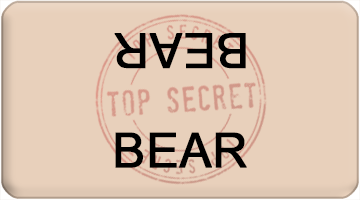
<style>
.page{position:relative;width:360px;height:200px;background:#e8d0bb}
.page>*{position:absolute;margin:0}
.t1{font:48px "ArialMT";color:#000000;font-weight:bold}
</style>
<div class="page">
<p class="t1" style="left:114px;top:33px;width:132px;height:36px;rotate:180deg">BEAR</p>
<p class="t1" style="left:115px;top:132px;width:132px;height:36px">BEAR</p>
</div>
